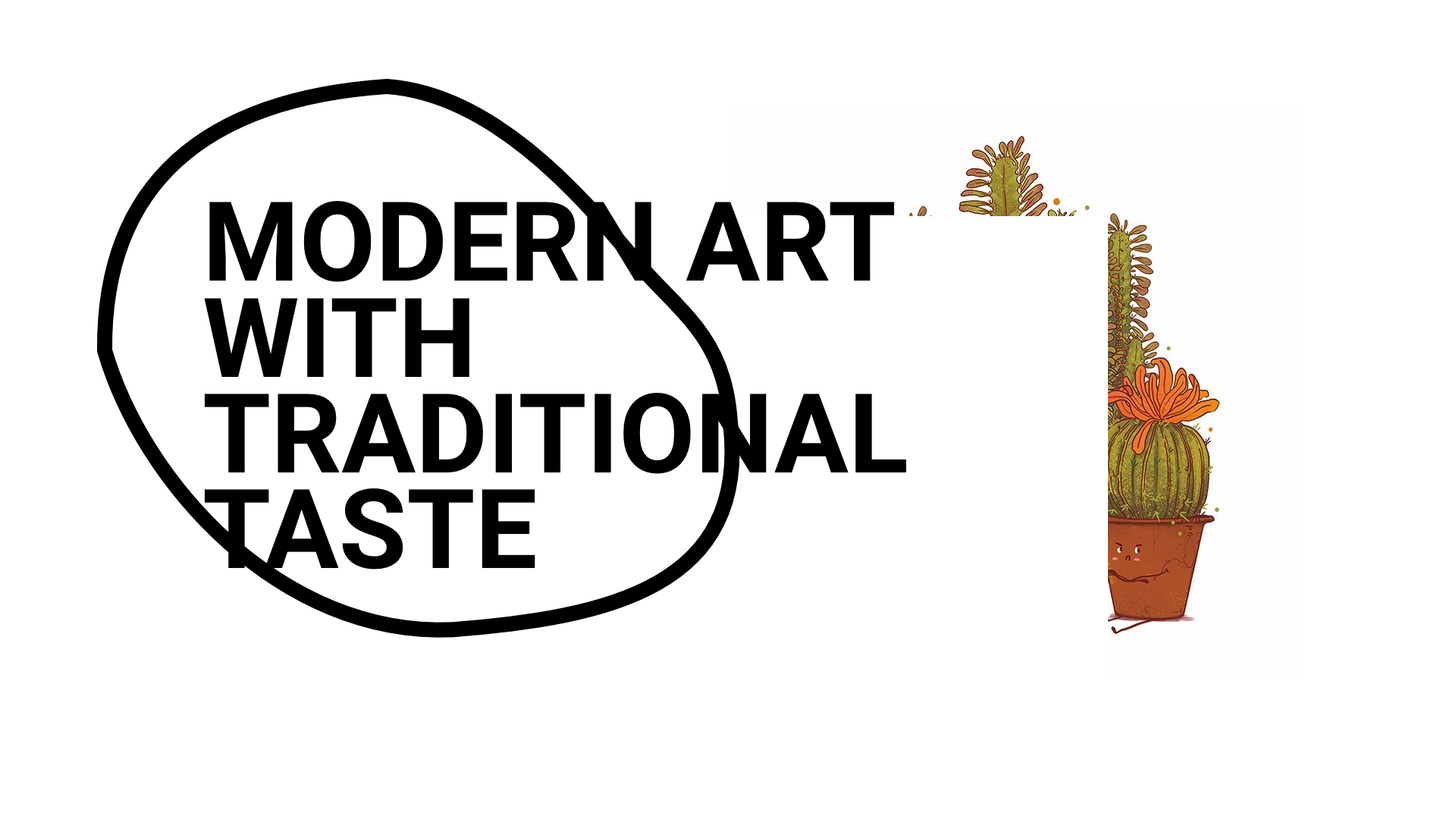
<style>
.page{position:relative;width:1456px;height:819px;background:#ffffff}
.page>*{position:absolute;margin:0}
.t1{font:110.5px/95.7px "Roboto-Bold";color:#000000;text-transform:uppercase}
</style>
<div class="page">
<p class="t1" style="left:204px;top:201px;width:702px;height:369px">Modern Art <br>With <br>Traditional<br>Taste</p>
</div>
